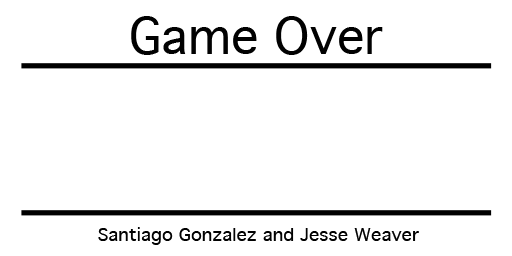
<style>
.page{position:relative;width:512px;height:256px;background:#ffffff}
.page>*{position:absolute;margin:0}
.t1{font:48px "Geneva";color:#010101}
.t2{font:18px "Geneva";color:#010101}
</style>
<div class="page">
<p class="t1" style="left:131px;top:16px;width:252px;height:39px">Game Over</p>
<p class="t2" style="left:98px;top:227px;width:321px;height:18px">Santiago Gonzalez and Jesse Weaver</p>
</div>
